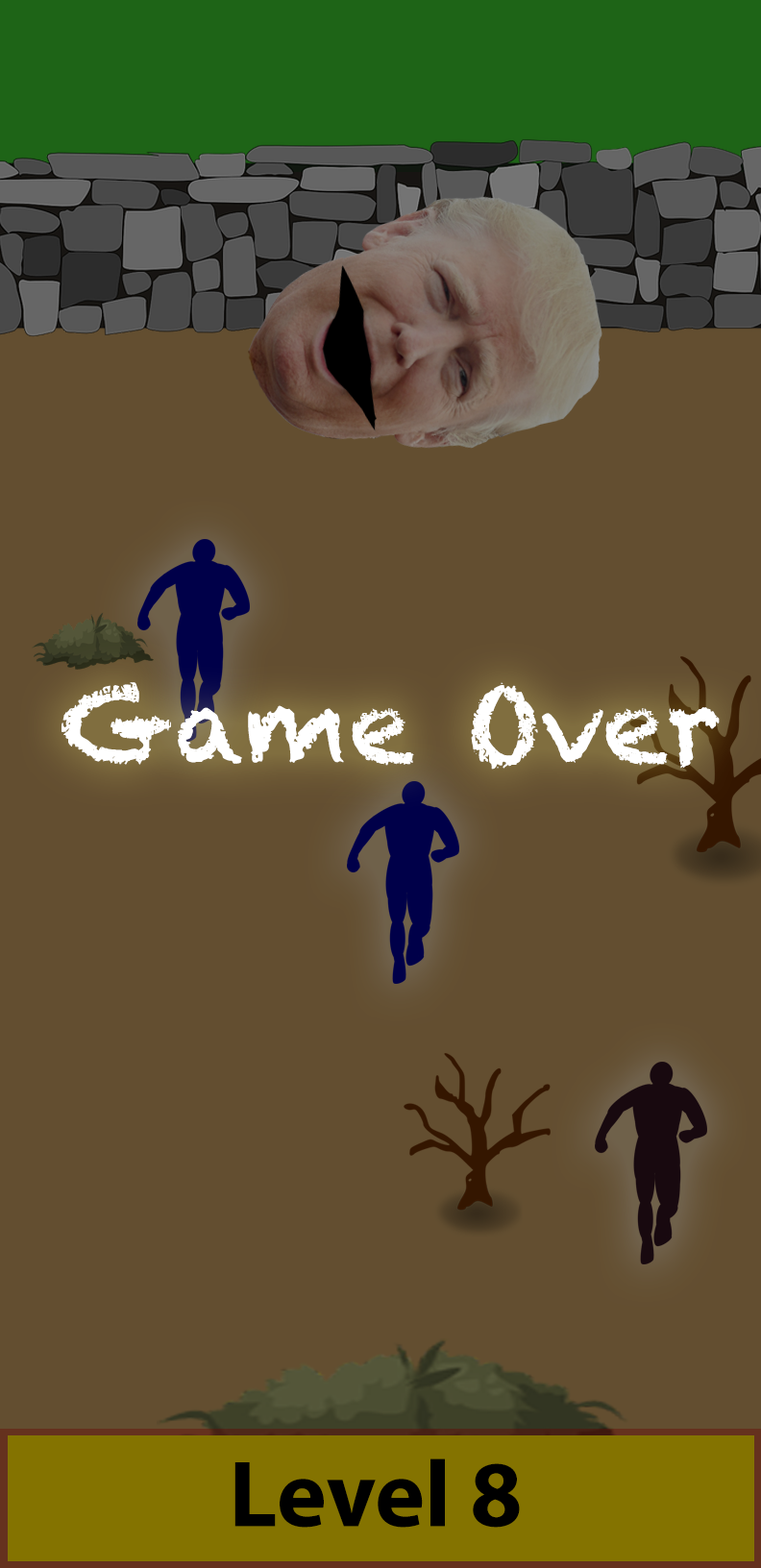
<style>
.page{position:relative;width:761px;height:1568px;background:#634e30}
.page>*{position:absolute;margin:0}
.t1{font:24.8px/49.5px "Chalkduster";color:#ffffff}
.t2{font:22.7px/45.5px "MyriadPro-Bold";color:#000000}
</style>
<div class="page">
<p class="t1" style="left:61px;top:682px;width:658px;height:87px;text-align:center">Game Over</p>
<p class="t2" style="left:234px;top:1458px;width:286px;height:69px;text-align:center">Level 8</p>
</div>
